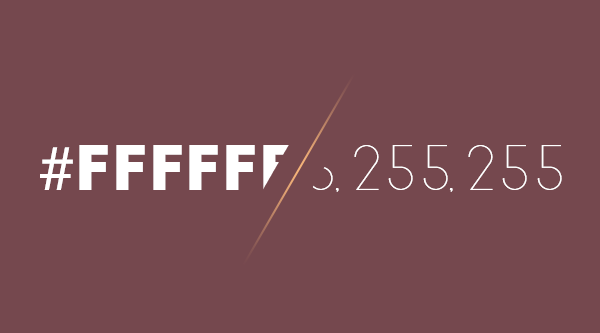
<style>
.page{position:relative;width:600px;height:333px;background:#75484e}
.page>*{position:absolute;margin:0}
.t1{font:60px "BigJohn";color:#ffffff}
.t2{font:60px "Roboto-Regular";color:#ffffff}
.t3{font:60px "SlimJoe";color:#ffffff}
</style>
<div class="page">
<p class="t1" style="left:40px;top:145px;width:252px;height:45px"><span class="t2">#</span>ffffff</p>
<p class="t3" style="left:308px;top:145px;width:254px;height:47px">5,255,255</p>
</div>
